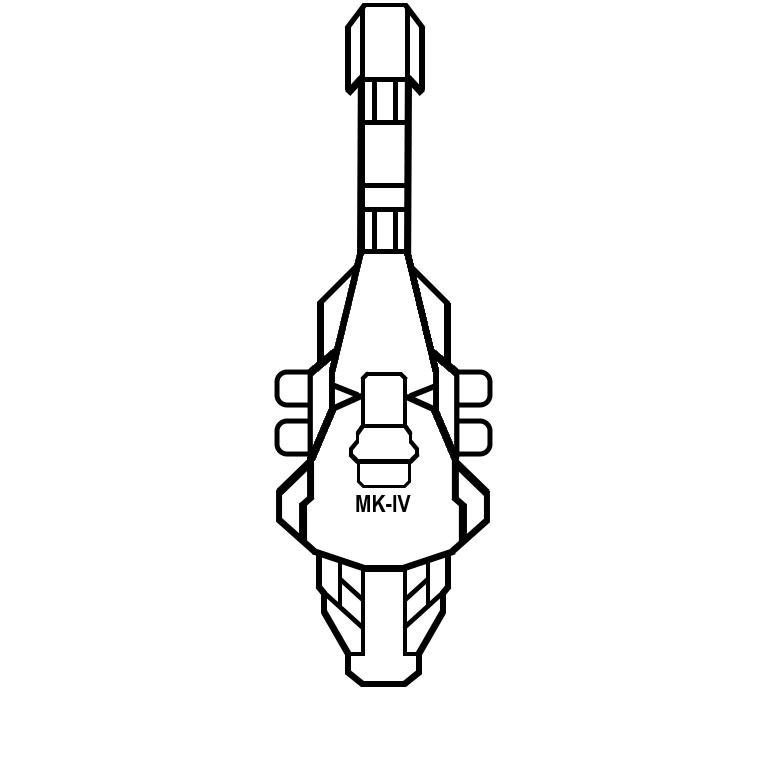
<style>
.page{position:relative;width:768px;height:768px;background:#ffffff}
.page>*{position:absolute;margin:0}
.t1{font:24px "ArialNarrow-Bold";color:#010002}
</style>
<div class="page">
<p class="t1" style="left:356px;top:495px;width:55px;height:17px">MK-IV</p>
</div>
